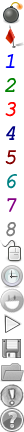
<style>
.page{position:relative;width:24px;height:432px;background:#ffffff}
.page>*{position:absolute;margin:0}
.t1{font:21px/24px "CourierNewPSMT";letter-spacing:0.05em;color:#0000ff;font-weight:bold;font-style:italic}
.t2{font:21px/24px "CourierNewPSMT";letter-spacing:0.05em;color:#008200;font-weight:bold;font-style:italic}
.t3{font:21px/24px "CourierNewPSMT";letter-spacing:0.05em;color:#ff0000;font-weight:bold;font-style:italic}
.t4{font:21px/24px "CourierNewPSMT";letter-spacing:0.05em;color:#000084;font-weight:bold;font-style:italic}
.t5{font:21px/24px "CourierNewPSMT";letter-spacing:0.05em;color:#840000;font-weight:bold;font-style:italic}
.t6{font:21px/24px "CourierNewPSMT";letter-spacing:0.05em;color:#008284;font-weight:bold;font-style:italic}
.t7{font:21px/24px "CourierNewPSMT";letter-spacing:0.05em;color:#840084;font-weight:bold;font-style:italic}
.t8{font:21px/24px "CourierNewPSMT";letter-spacing:0.05em;color:#808080;font-weight:bold;font-style:italic}
</style>
<div class="page">
<p class="t1" style="left:5px;top:54px;width:12px;height:183px">1<br><span class="t2">2<br></span><span class="t3">3<br></span><span class="t4">4<br></span><span class="t5">5<br></span><span class="t6">6<br></span><span class="t7">7<br></span><span class="t8">8</span></p>
</div>
